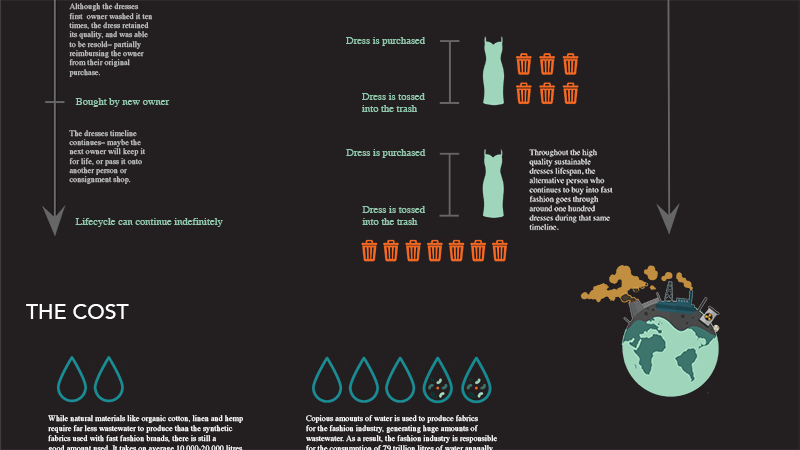
<style>
.page{position:relative;width:800px;height:450px;background:#231f20}
.page>*{position:absolute;margin:0}
.t1{font:8.2px/9.4px "Times-Roman";color:#bfbfbf}
.t2{font:10.5px "Times-Roman";color:#92c8ad}
.t3{font:10.5px/11.7px "Times-Roman";color:#92c8ad}
.t4{font:8.2px/9.4px "Times-Roman"}
.t5{font:21.1px "Avenir-Medium";color:#ffffff}
</style>
<div class="page">
<p class="t1" style="left:69px;top:3px;width:83px;height:74px">Although the dresses first  owner washed it ten times, the dress retained its quality, and was able to be resold– partially reimbursing the owner from their original <br>purchase.</p>
<p class="t2" style="left:346px;top:37px;width:79px;height:9px">Dress is purchased</p>
<p class="t2" style="left:75px;top:98px;width:95px;height:9px">Bought by new owner</p>
<p class="t3" style="left:362px;top:93px;width:63px;height:19px">Dress is tossed<br>into the trash</p>
<p class="t1" style="left:69px;top:130px;width:76px;height:54px">The dresses timeline continues– maybe the next owner will keep it for life, or pass it onto another person or <br>consignment shop.</p>
<p class="t2" style="left:346px;top:149px;width:80px;height:9px">Dress is purchased</p>
<p class="t4" style="left:529px;top:149px;width:84px;height:82px">Throughout the high quality sustainable dresses lifespan, the alternative person who continues to buy into fast fashion goes through around one hundred dresses during that same timeline.</p>
<p class="t3" style="left:362px;top:206px;width:63px;height:19px">Dress is tossed<br>into the trash</p>
<p class="t2" style="left:75px;top:218px;width:148px;height:9px">Lifecycle can continue indefinitely</p>
<p class="t5" style="left:26px;top:304px;width:103px;height:15px">THE COST</p>
</div>
